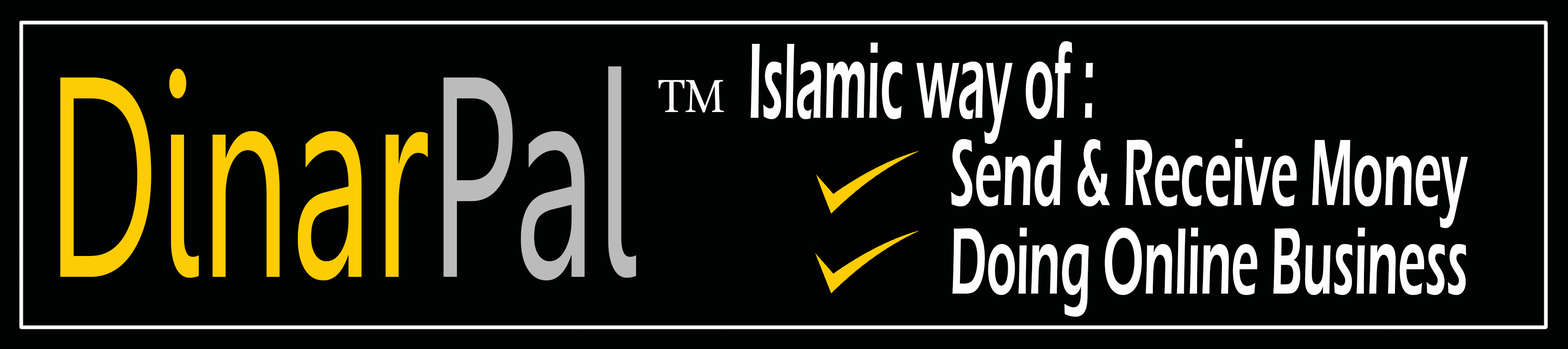
<style>
.page{position:relative;width:1568px;height:349px;background:#010202}
.page>*{position:absolute;margin:0}
.t1{font:110.6px "ErasITC-Demi";color:#fdfdfd;scale:0.44 1}
.t2{font:284px "Gisha";color:#fecc02;scale:0.57 1}
.t3{font:284px "Gisha";color:#bbbbbb;scale:0.57 1}
.t4{font:68.1px "MicrosoftUighur";color:#fdfdfd;scale:0.92 1}
.t5{font:97.3px "ErasITC-Demi";color:#fdfdfd;scale:0.5 1}
</style>
<div class="page">
<p class="t1" style="left:751px;top:41px;width:342px;height:103px">Islamic way of :</p>
<p class="t2" style="left:60px;top:66px;width:576px;height:214px">Dinar<span class="t3">Pal</span></p>
<p class="t4" style="left:658px;top:80px;width:66px;height:33px">TM</p>
<p class="t5" style="left:951px;top:139px;width:517px;height:89px">Send &amp; Receive Money</p>
<p class="t5" style="left:952px;top:227px;width:514px;height:89px">Doing Online Business</p>
</div>
